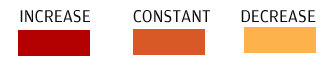
<style>
.page{position:relative;width:329px;height:65px;background:#ffffff}
.page>*{position:absolute;margin:0}
.t1{font:18px "Amplitude-Book";color:#0e0e0e}
</style>
<div class="page">
<p class="t1" style="left:20px;top:10px;width:296px;height:13px">INCREASE          CONSTANT       DECREASE</p>
</div>
